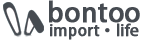
<style>
.page{position:relative;width:146px;height:40px;background:#ffffff}
.page>*{position:absolute;margin:0}
.t1{font:26.7px "AdobeHeitiStd-Regular";color:#464b51;font-weight:bold}
.t2{font:15.6px "AdobeHeitiStd-Regular";color:#464b51;font-weight:bold}
</style>
<div class="page">
<p class="t1" style="left:49px;top:0px;width:91px;height:23px">bontoo</p>
<p class="t2" style="left:50px;top:23px;width:89px;height:17px">import·life</p>
</div>
